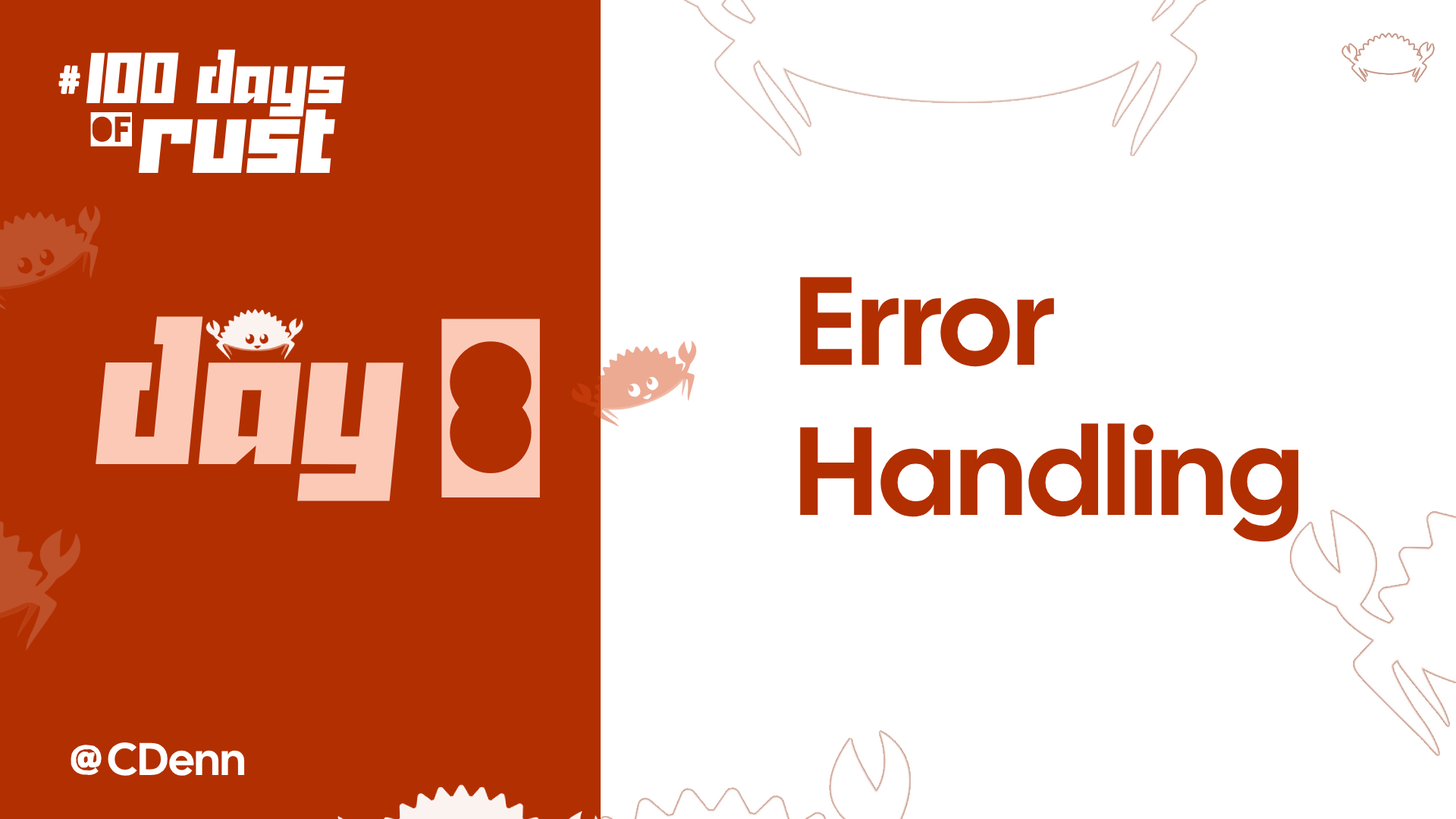
<style>
.page{position:relative;width:1456px;height:819px;background:#ffffff}
.page>*{position:absolute;margin:0}
.t1{font:68.6px "Yukarimobile";color:#ffffff}
.t2{font:40.6px "Matiz";color:#ffffff}
.t3{font:40.6px "Blackout-2AM";color:#ffffff}
.t4{font:99.8px "Yukarimobile";color:#ffffff}
.t5{font:125.1px "CalSans-Regular";color:#b22f01}
.t6{font:189.2px "Yukarimobile";color:#fcc9b7}
.t7{font:212.6px "Blackout-2AM";color:#fcc9b7}
.t8{font:45.9px "CalSans-Regular";color:#ffffff}
</style>
<div class="page">
<p class="t1" style="left:86px;top:49px;width:259px;height:68px">100 Days</p>
<p class="t2" style="left:58px;top:65px;width:22px;height:29px">#</p>
<p class="t3" style="left:90px;top:112px;width:42px;height:34px">of</p>
<p class="t4" style="left:138px;top:109px;width:197px;height:65px">Rust</p>
<p class="t5" style="left:800px;top:277px;width:499px;height:265px">Error<br>Handling</p>
<p class="t6" style="left:96px;top:316px;width:307px;height:185px">Day</p>
<p class="t7" style="left:441px;top:318px;width:99px;height:179px">8</p>
<p class="t2" style="left:71px;top:745px;width:31px;height:30px">@</p>
<p class="t8" style="left:108px;top:742px;width:137px;height:34px">CDenn</p>
</div>
